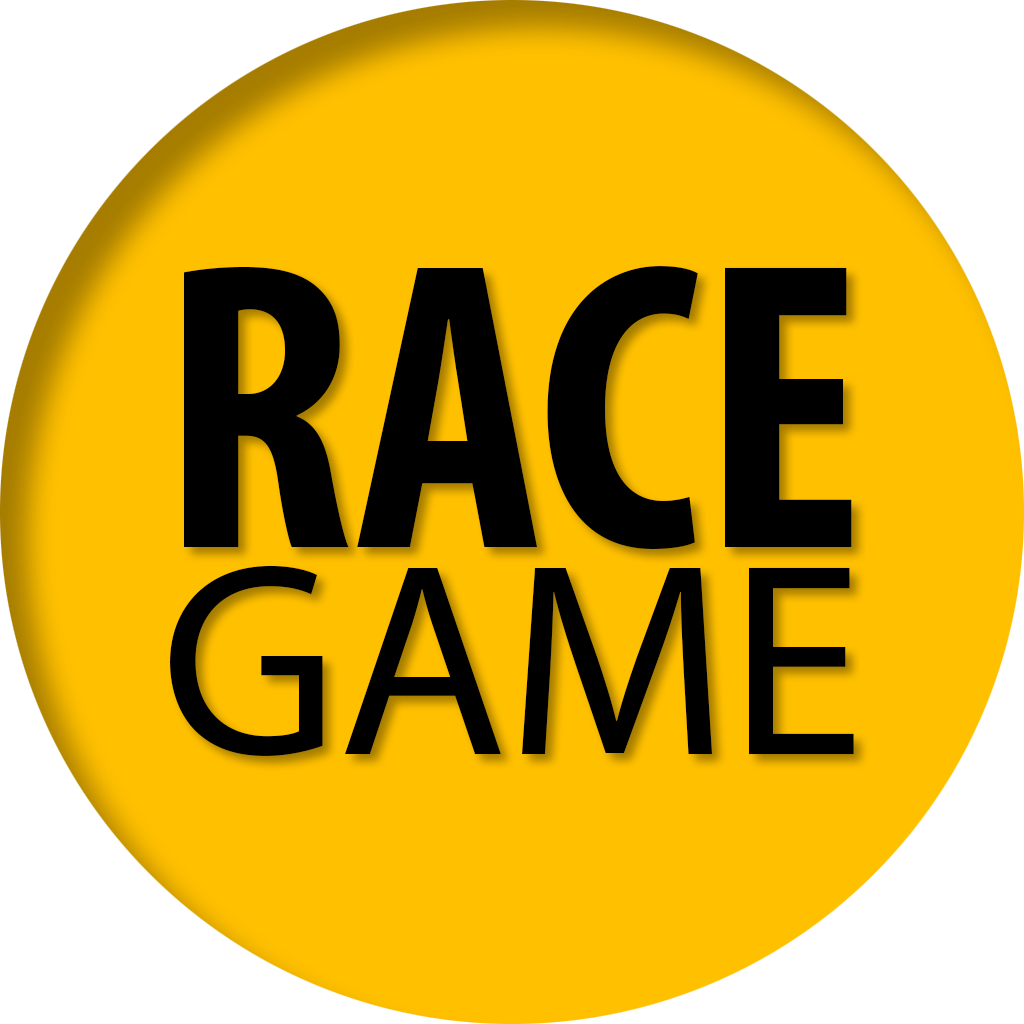
<style>
.page{position:relative;width:1024px;height:1024px;background:#ffc000}
.page>*{position:absolute;margin:0}
.t1{font:414px/207px "MyriadPro-BoldCond";color:#000000}
.t2{font:276px/207px "MyriadPro-Regular";color:#000000}
</style>
<div class="page">
<p class="t1" style="left:170px;top:266px;width:684px;height:490px;text-align:center">RACE<br><span class="t2">GAME</span></p>
</div>
